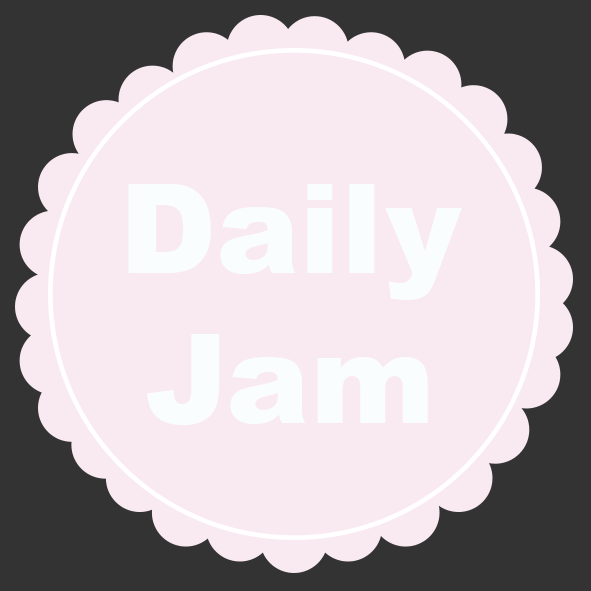
<style>
.page{position:relative;width:591px;height:591px;background:#f9e9f0}
.page>*{position:absolute;margin:0}
.t1{font:125px "Arial-Black";color:#f9fdfd}
</style>
<div class="page">
<p class="t1" style="left:128px;top:184px;width:334px;height:241px;text-align:center">Daily<br>Jam</p>
</div>
